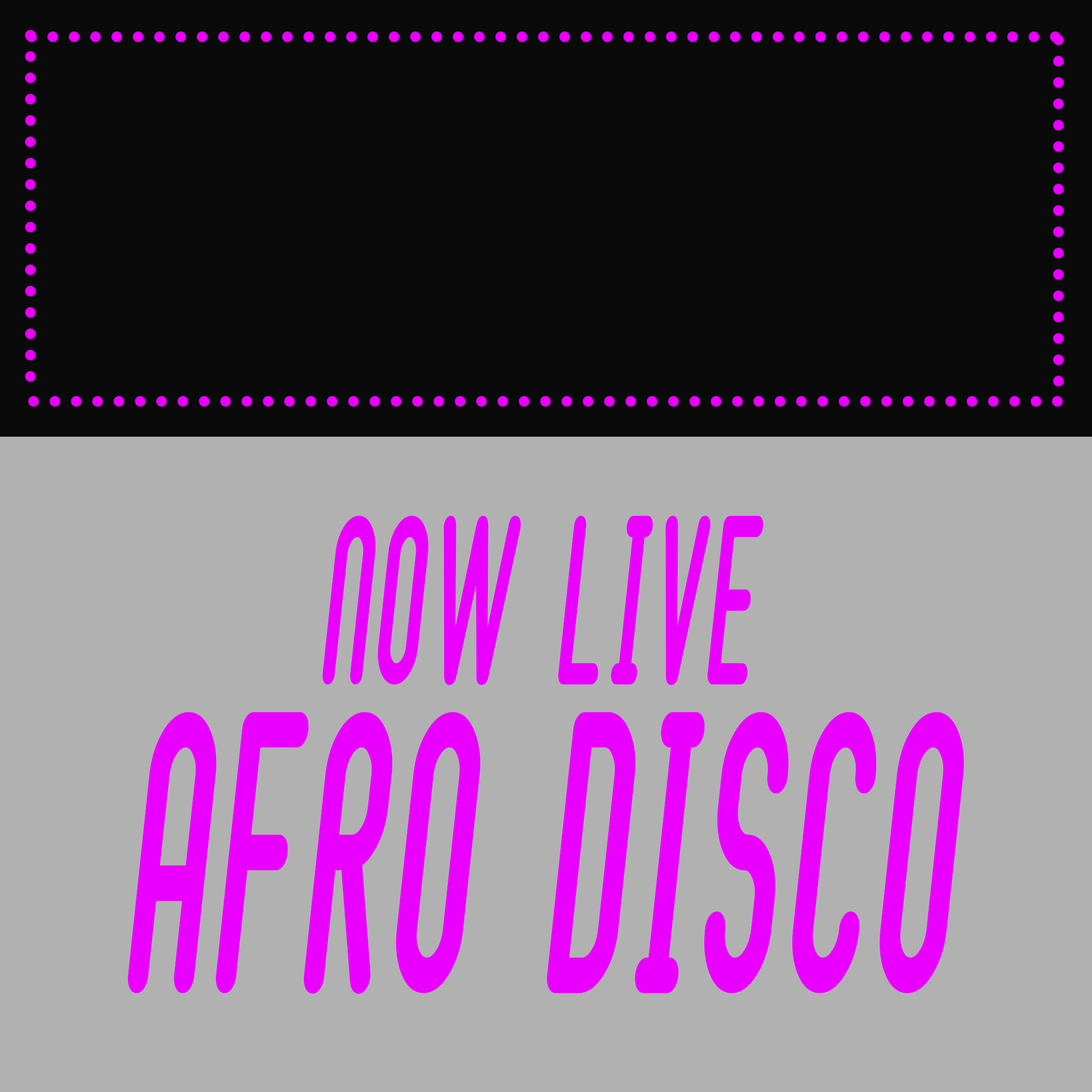
<style>
.page{position:relative;width:1092px;height:1092px;background:#b1b1b1}
.page>*{position:absolute;margin:0}
.t1{font:255.9px/307.7px "BubbleBoy2";color:#ea00ff;font-weight:bold;scale:0.5 1}
.t2{font:153.6px/307.7px "BubbleBoy2";color:#ea00ff;font-weight:bold;scale:0.5 1}
</style>
<div class="page">
<p class="t1" style="left:127px;top:516px;width:837px;height:478px;text-align:center"><span class="t2">NOW LIVE<br></span>AFRO DISCO</p>
</div>
